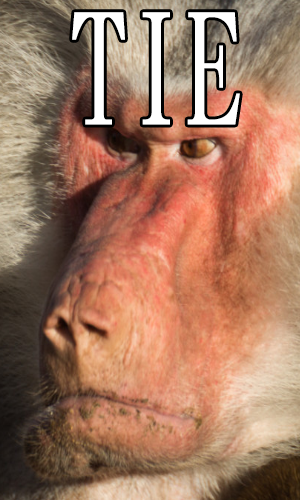
<style>
.page{position:relative;width:300px;height:500px}
.page>*{position:absolute;margin:0}
.t1{font:152px "DFKaiShu-SB-Estd-BF";color:#ffffff;scale:0.76 1}
</style>
<div class="page">
<p class="t1" style="left:72px;top:12px;width:168px;height:113px">TIE</p>
</div>
